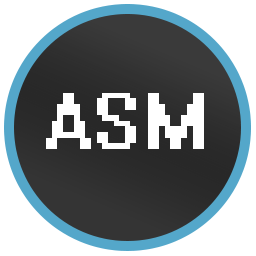
<style>
.page{position:relative;width:256px;height:256px;background:#ffffff}
.page>*{position:absolute;margin:0}
.t1{font:72px "System";color:#ffffff}
</style>
<div class="page">
<p class="t1" style="left:46px;top:93px;width:158px;height:56px">ASM</p>
</div>
